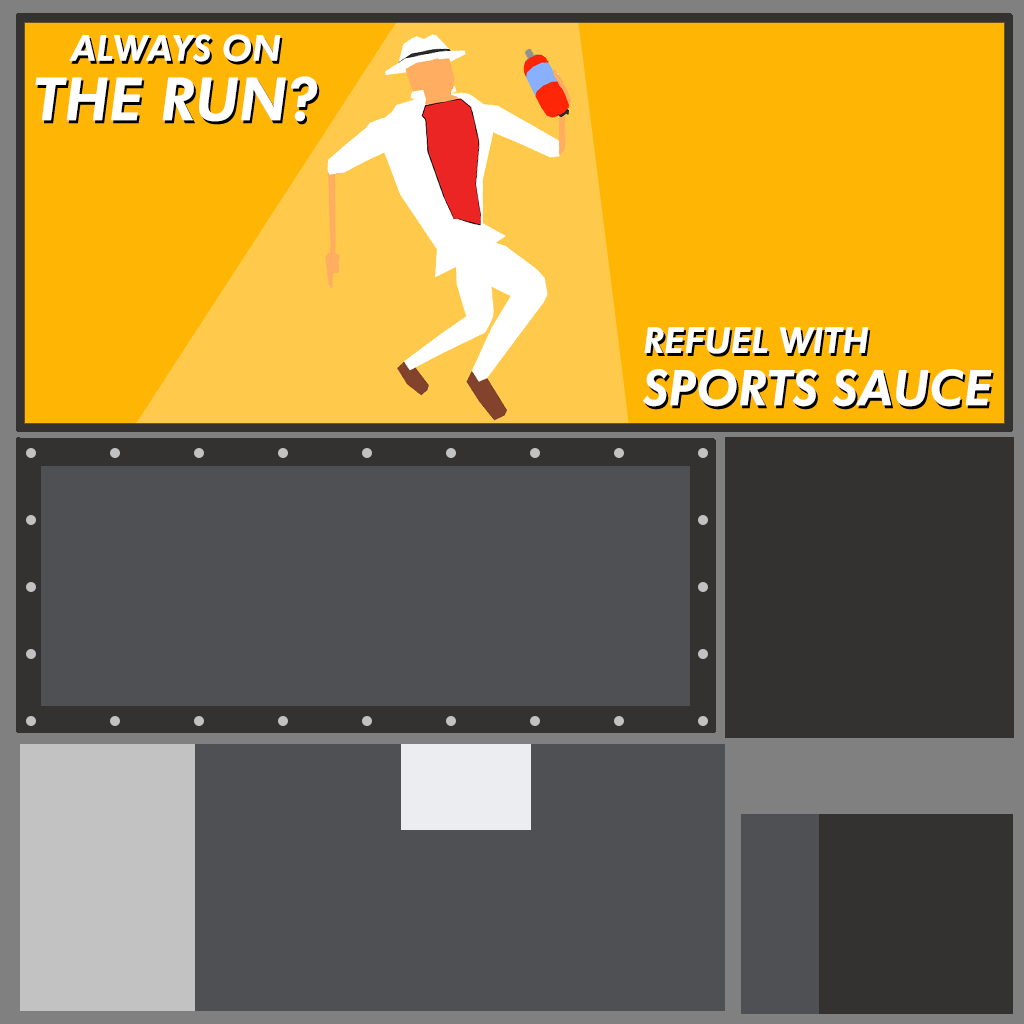
<style>
.page{position:relative;width:1024px;height:1024px;background:#4e5054}
.page>*{position:absolute;margin:0}
.t1{font:35.6px/59.4px "FuturaBT-HeavyItalic";color:#ffffff}
.t2{font:59.4px/59.4px "FuturaBT-HeavyItalic";color:#ffffff}
.t3{font:49.1px/52.4px "FuturaBT-HeavyItalic";color:#ffffff}
.t4{font:35.6px/52.4px "FuturaBT-HeavyItalic";color:#ffffff}
</style>
<div class="page">
<p class="t1" style="left:35px;top:34px;width:283px;height:88px;text-align:center">ALWAYS ON<br><span class="t2">THE RUN?</span></p>
<p class="t3" style="left:643px;top:327px;width:349px;height:80px"><span class="t4">REFUEL WITH <br></span>SPORTS SAUCE</p>
</div>
